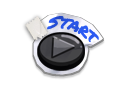
<style>
.page{position:relative;width:126px;height:95px;background:#ffffff}
.page>*{position:absolute;margin:0}
.t1{font:17.9px "PermanentMarker";color:#2c5df3;scale:1.07 1}
</style>
<div class="page">
<p class="t1" style="left:47px;top:16px;width:52px;height:27px;rotate:21deg">Start</p>
</div>
